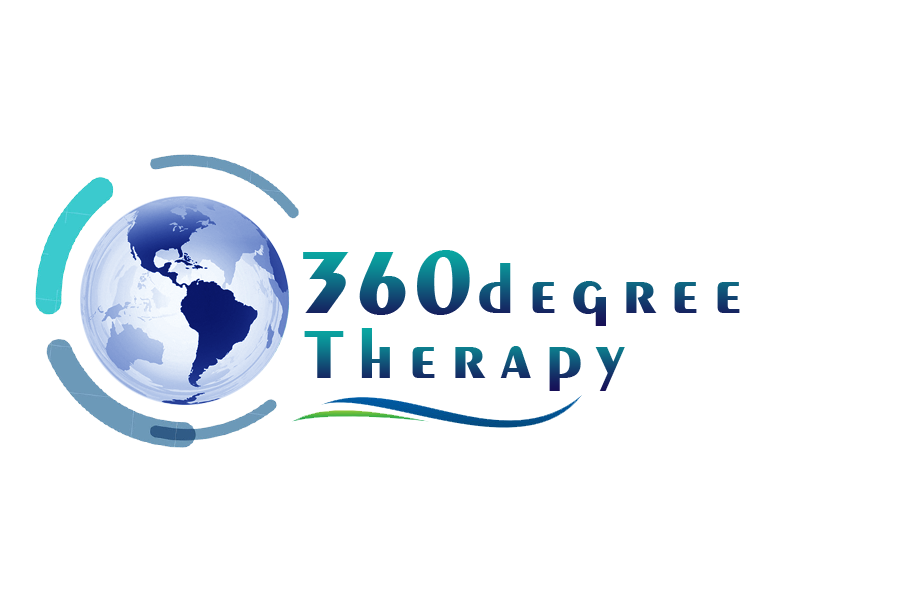
<style>
.page{position:relative;width:900px;height:600px;background:#ffffff}
.page>*{position:absolute;margin:0}
.t1{font:71.5px "Exotic350BT-Bold";letter-spacing:0.185em}
.t2{font:93.5px "Exotic350BT-Bold";letter-spacing:0.045em}
</style>
<div class="page">
<p class="t1" style="left:303px;top:250px;width:437px;height:76px"><span class="t2">360</span>degree</p>
<p class="t1" style="left:304px;top:328px;width:321px;height:63px">Therapy</p>
</div>
